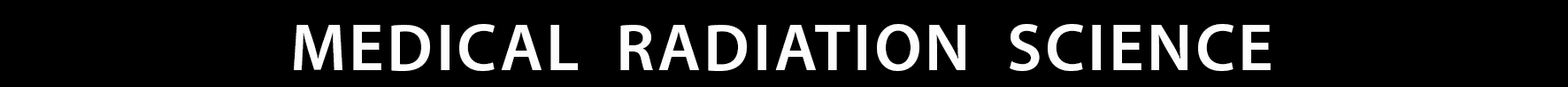
<style>
.page{position:relative;width:1568px;height:87px;background:#000000}
.page>*{position:absolute;margin:0}
.t1{font:67.6px "MyriadPro-Semibold";letter-spacing:0.045em;color:#fdfdfd}
</style>
<div class="page">
<p class="t1" style="left:294px;top:24px;width:977px;height:47px">MEDICAL  RADIATION  SCIENCE</p>
</div>
